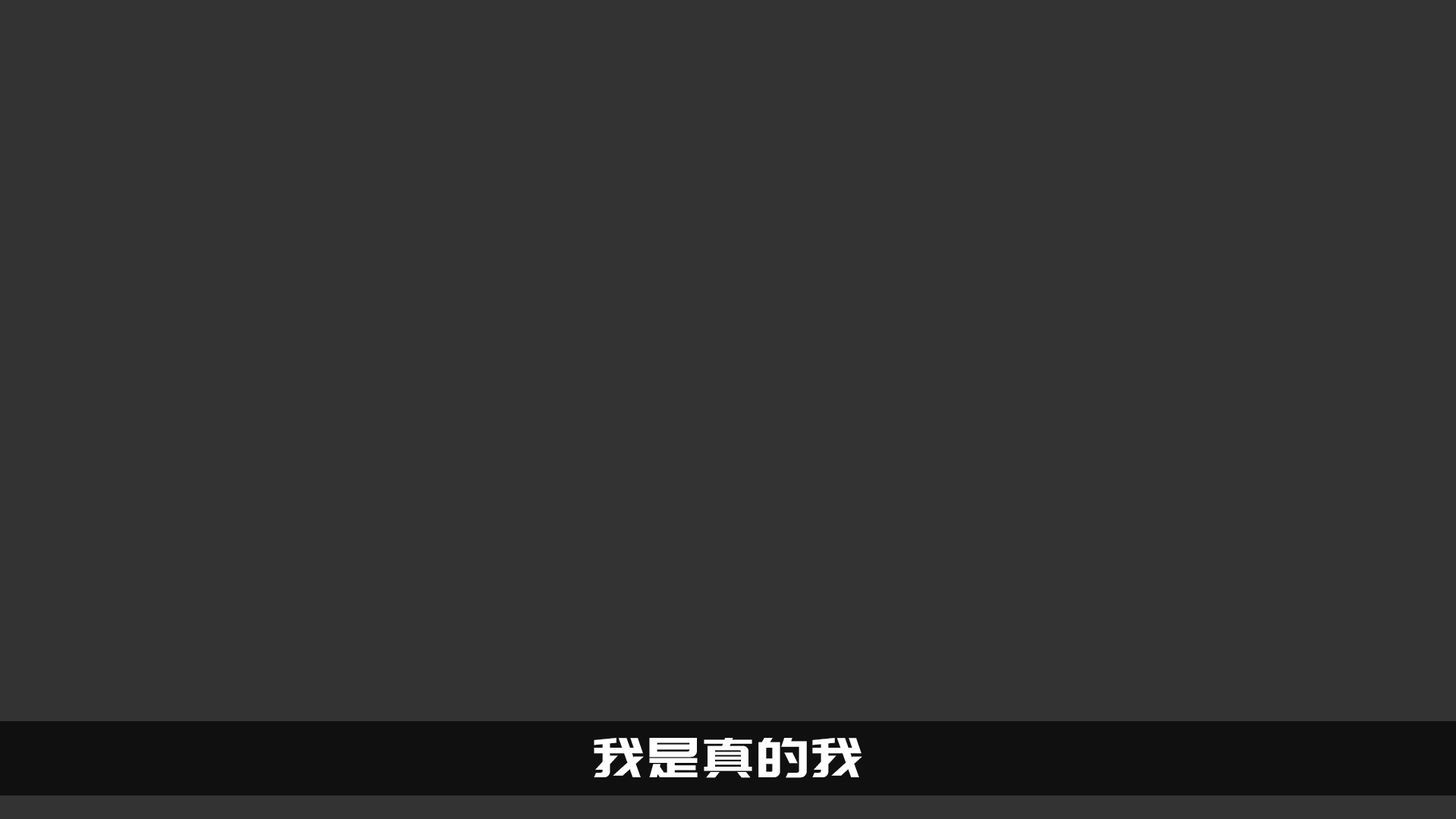
<style>
.page{position:relative;width:1456px;height:819px;background:#333333}
.page>*{position:absolute;margin:0}
.t1{font:54.6px "PangMenZhengDao-3";color:#ffffff}
</style>
<div class="page">
<p class="t1" style="left:594px;top:738px;width:268px;height:40px">我是真的我</p>
</div>
